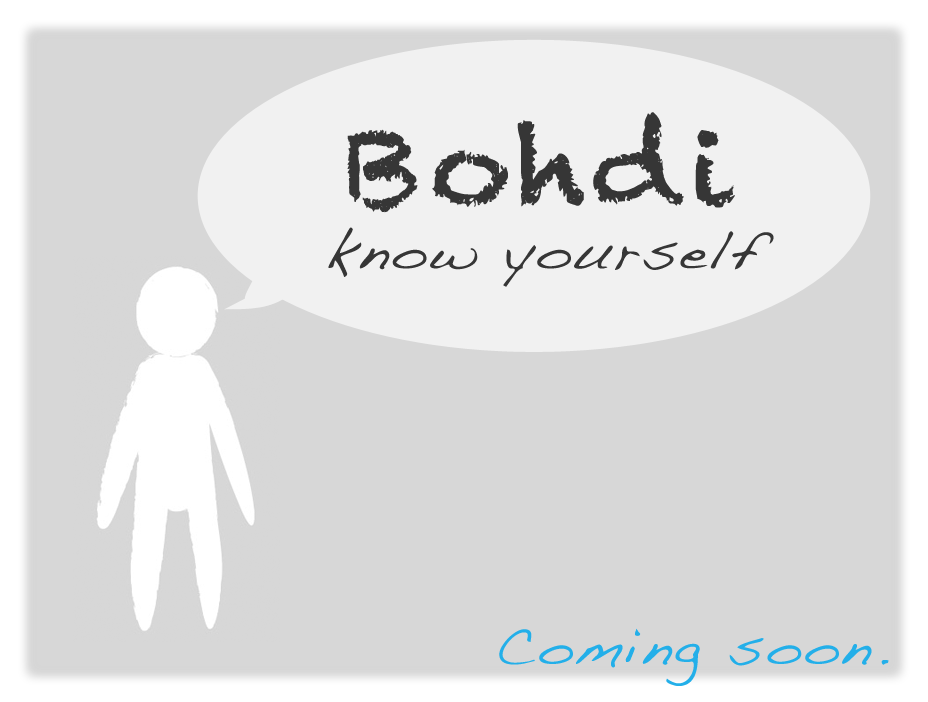
<style>
.page{position:relative;width:928px;height:702px;background:#d7d7d7}
.page>*{position:absolute;margin:0}
.t1{font:106.7px "Chalkduster";letter-spacing:0.04em;color:#363636;scale:1.07 1}
.t2{font:53.4px "Handwriting-Dakota";letter-spacing:0.04em;color:#363636;scale:1.07 1}
.t3{font:53.4px "Handwriting-Dakota";letter-spacing:0.04em;color:#23afe9;scale:1.07 1}
</style>
<div class="page">
<p class="t1" style="left:347px;top:112px;width:388px;height:101px">Bohdi</p>
<p class="t2" style="left:328px;top:227px;width:446px;height:60px">know yourself</p>
<p class="t3" style="left:499px;top:628px;width:390px;height:58px">Coming soon.</p>
</div>
